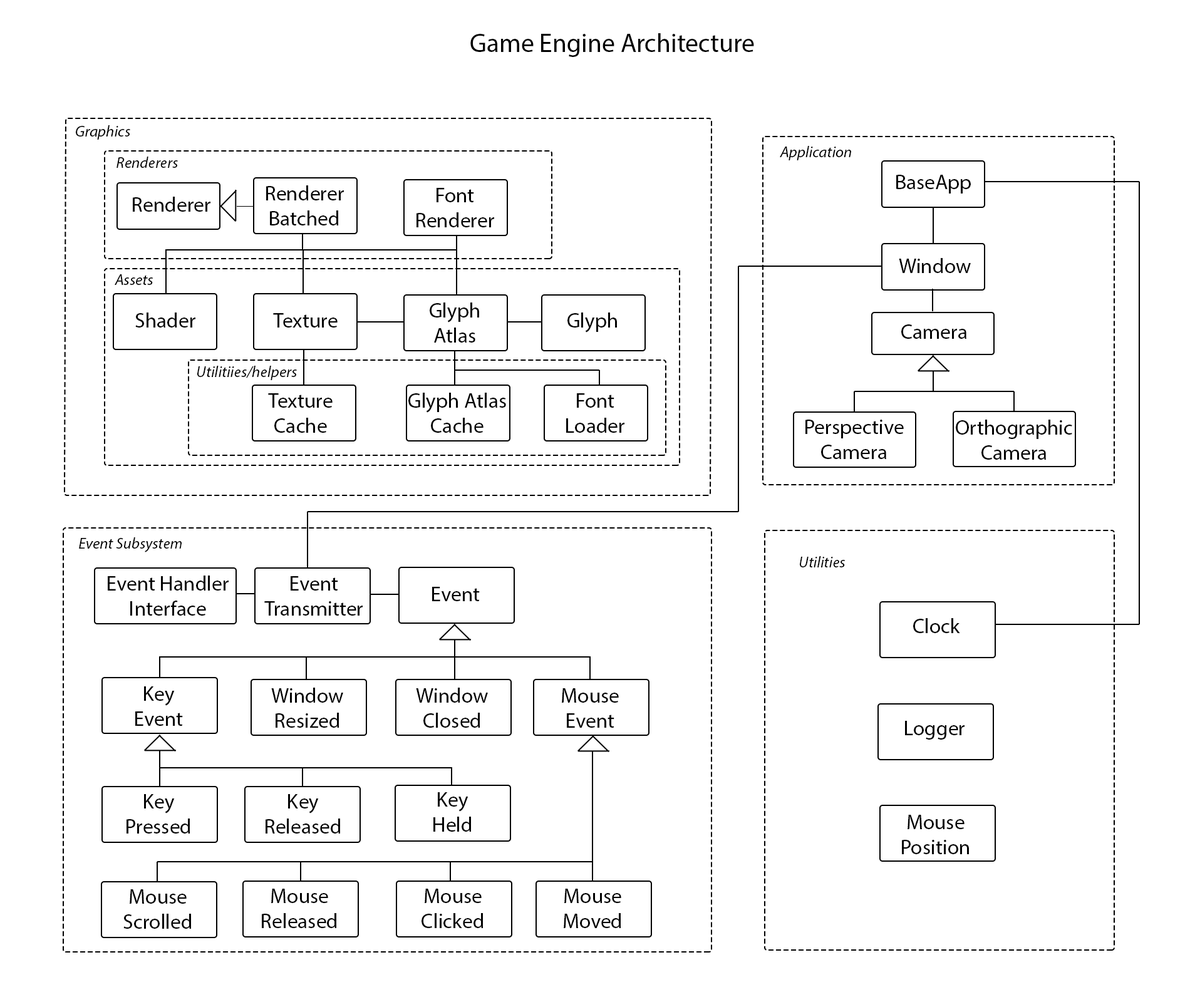
<style>
.page{position:relative;width:1190px;height:1002px;background:#ffffff}
.page>*{position:absolute;margin:0}
.t1{font:26.1px "MyriadPro-Regular";color:#000000}
.t2{font:15.7px "MyriadPro-It";color:#000000}
.t3{font:20.9px "MyriadPro-Regular";color:#000000}
</style>
<div class="page">
<p class="t1" style="left:470px;top:33px;width:284px;height:24px">Game Engine Architecture</p>
<p class="t2" style="left:76px;top:125px;width:54px;height:15px">Graphics</p>
<p class="t2" style="left:780px;top:146px;width:71px;height:14px">Application</p>
<p class="t2" style="left:116px;top:157px;width:62px;height:11px">Renderers</p>
<p class="t3" style="left:266px;top:185px;width:78px;height:40px;text-align:center">Renderer<br>Batched</p>
<p class="t3" style="left:896px;top:175px;width:75px;height:19px">BaseApp</p>
<p class="t3" style="left:133px;top:197px;width:77px;height:15px">Renderer</p>
<p class="t3" style="left:416px;top:188px;width:78px;height:39px;text-align:center">Font<br>Renderer</p>
<p class="t3" style="left:899px;top:258px;width:72px;height:15px">Window</p>
<p class="t2" style="left:115px;top:274px;width:38px;height:11px">Assets</p>
<p class="t3" style="left:430px;top:303px;width:49px;height:40px;text-align:center">Glyph<br>Atlas</p>
<p class="t3" style="left:135px;top:313px;width:60px;height:15px">Shader</p>
<p class="t3" style="left:273px;top:313px;width:65px;height:15px">Texture</p>
<p class="t3" style="left:567px;top:313px;width:50px;height:20px">Glyph</p>
<p class="t3" style="left:901px;top:324px;width:65px;height:15px">Camera</p>
<p class="t2" style="left:197px;top:366px;width:100px;height:14px">Utilitiies/helpers</p>
<p class="t3" style="left:268px;top:393px;width:65px;height:40px;text-align:center">Texture<br>Cache</p>
<p class="t3" style="left:408px;top:393px;width:98px;height:40px;text-align:center">Glyph Atlas<br>Cache</p>
<p class="t3" style="left:566px;top:393px;width:58px;height:40px;text-align:center">Font<br>Loader</p>
<p class="t3" style="left:805px;top:420px;width:99px;height:39px;text-align:center">Perspective<br>Camera</p>
<p class="t3" style="left:956px;top:420px;width:116px;height:40px;text-align:center">Orthographic Camera</p>
<p class="t2" style="left:79px;top:537px;width:103px;height:15px">Event Subsystem</p>
<p class="t2" style="left:800px;top:556px;width:46px;height:11px">Utilities</p>
<p class="t3" style="left:108px;top:576px;width:121px;height:40px;text-align:center">Event Handler<br>Interface</p>
<p class="t3" style="left:264px;top:576px;width:99px;height:40px;text-align:center">Event<br>Transmitter</p>
<p class="t3" style="left:432px;top:587px;width:48px;height:14px">Event</p>
<p class="t3" style="left:913px;top:618px;width:47px;height:15px">Clock</p>
<p class="t3" style="left:135px;top:686px;width:48px;height:40px;text-align:center">Key<br>Event</p>
<p class="t3" style="left:271px;top:688px;width:72px;height:40px;text-align:center">Window<br>Resized</p>
<p class="t3" style="left:416px;top:688px;width:72px;height:40px;text-align:center">Window<br>Closed</p>
<p class="t3" style="left:562px;top:688px;width:57px;height:40px;text-align:center">Mouse<br>Event</p>
<p class="t3" style="left:905px;top:721px;width:59px;height:19px">Logger</p>
<p class="t3" style="left:127px;top:794px;width:63px;height:40px;text-align:center">Key<br>Pressed</p>
<p class="t3" style="left:266px;top:794px;width:74px;height:40px;text-align:center">Key<br>Released</p>
<p class="t3" style="left:433px;top:792px;width:38px;height:40px;text-align:center">Key<br>Held</p>
<p class="t3" style="left:902px;top:815px;width:67px;height:39px;text-align:center">Mouse<br>Position</p>
<p class="t3" style="left:123px;top:889px;width:68px;height:40px;text-align:center">Mouse<br>Scrolled</p>
<p class="t3" style="left:262px;top:889px;width:74px;height:39px;text-align:center">Mouse<br>Released</p>
<p class="t3" style="left:421px;top:889px;width:62px;height:39px;text-align:center">Mouse<br>Clicked</p>
<p class="t3" style="left:564px;top:889px;width:57px;height:39px;text-align:center">Mouse<br>Moved</p>
</div>
